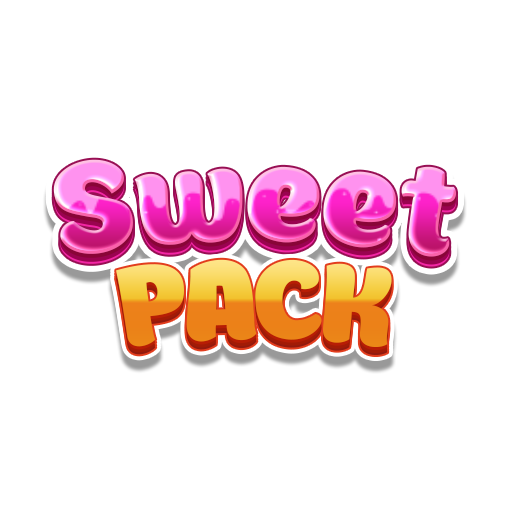
<style>
.page{position:relative;width:512px;height:512px;background:#ffffff}
.page>*{position:absolute;margin:0}
.t1{font:145.5px "Boomboom"}
.t2{font:124.7px "Boomboom";letter-spacing:-0.04em}
</style>
<div class="page">
<p class="t1" style="left:53px;top:159px;width:404px;height:98px">Sweet</p>
<p class="t2" style="left:116px;top:259px;width:276px;height:88px">PACK</p>
</div>
